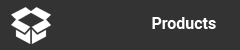
<style>
.page{position:relative;width:240px;height:50px;background:#333333}
.page>*{position:absolute;margin:0}
.t1{font:16px "Roboto-Bold";color:#ffffff}
</style>
<div class="page">
<p class="t1" style="left:152px;top:17px;width:64px;height:12px">Products</p>
</div>
